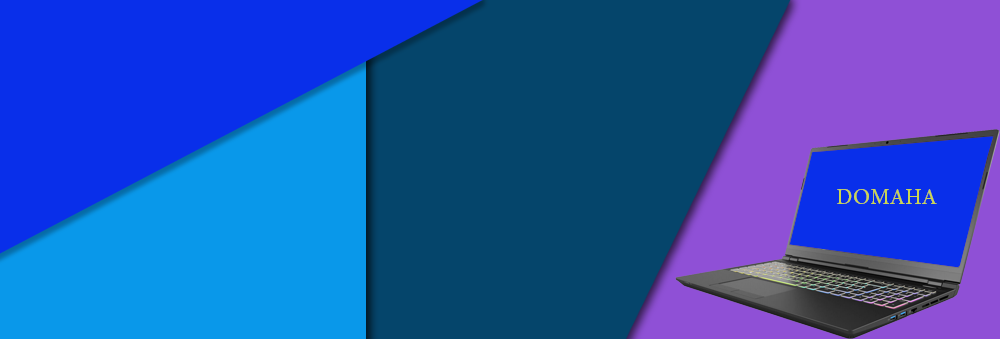
<style>
.page{position:relative;width:1000px;height:339px;background:#05456b}
.page>*{position:absolute;margin:0}
.t1{font:30px "AdobeArabic-Regular";color:#cbd650}
</style>
<div class="page">
<p class="t1" style="left:837px;top:189px;width:100px;height:15px">DOMAHA</p>
</div>
